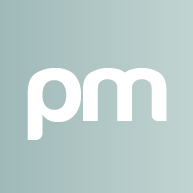
<style>
.page{position:relative;width:193px;height:193px}
.page>*{position:absolute;margin:0}
.t1{font:100px "Harabara";color:#ffffff;scale:1.08 1}
</style>
<div class="page">
<p class="t1" style="left:27px;top:68px;width:140px;height:72px">pm</p>
</div>
